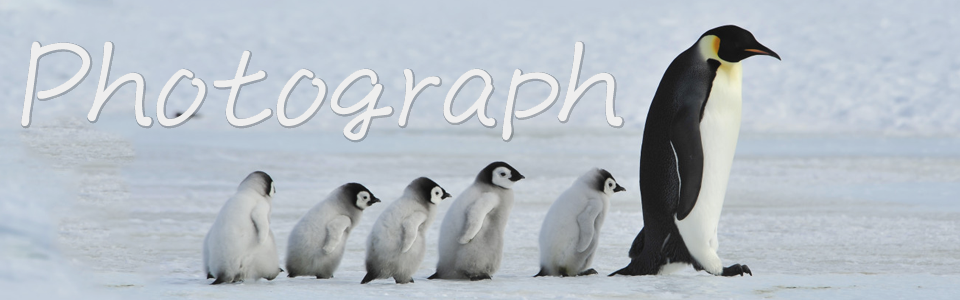
<style>
.page{position:relative;width:960px;height:300px}
.page>*{position:absolute;margin:0}
.t1{font:128.7px "DFTegakiKaku-W4-WING-RKSJ-H";color:#eeeeee}
</style>
<div class="page">
<p class="t1" style="left:21px;top:41px;width:602px;height:99px">Photograph</p>
</div>
